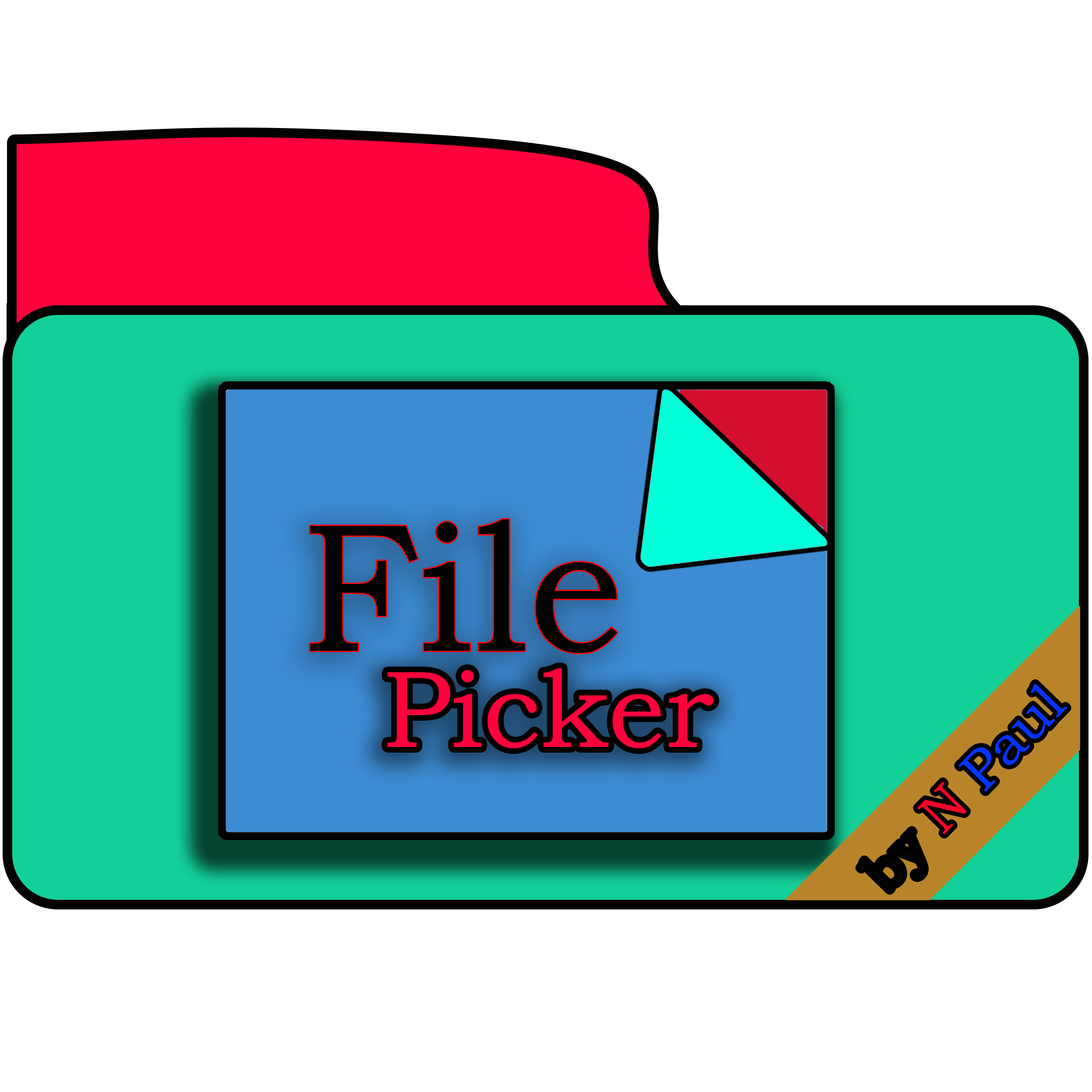
<style>
.page{position:relative;width:1092px;height:1092px;background:#ffffff}
.page>*{position:absolute;margin:0}
.t1{font:183.5px "BookmanOldStyle";color:#030303}
.t2{font:109.6px "BookmanOldStyle";color:#ff023d}
.t3{font:55.5px "BookmanOldStyle";color:#0335ff}
.t4{font:55.5px "BookmanOldStyle";color:#030303}
.t5{font:55.5px "BookmanOldStyle";color:#ff022c}
</style>
<div class="page">
<p class="t1" style="left:310px;top:519px;width:307px;height:134px">File</p>
<p class="t2" style="left:387px;top:668px;width:327px;height:80px">Picker</p>
<p class="t3" style="left:860px;top:683px;width:207px;height:208px;rotate:-46deg"><span class="t4">by </span><span class="t5">N </span>Paul</p>
</div>
